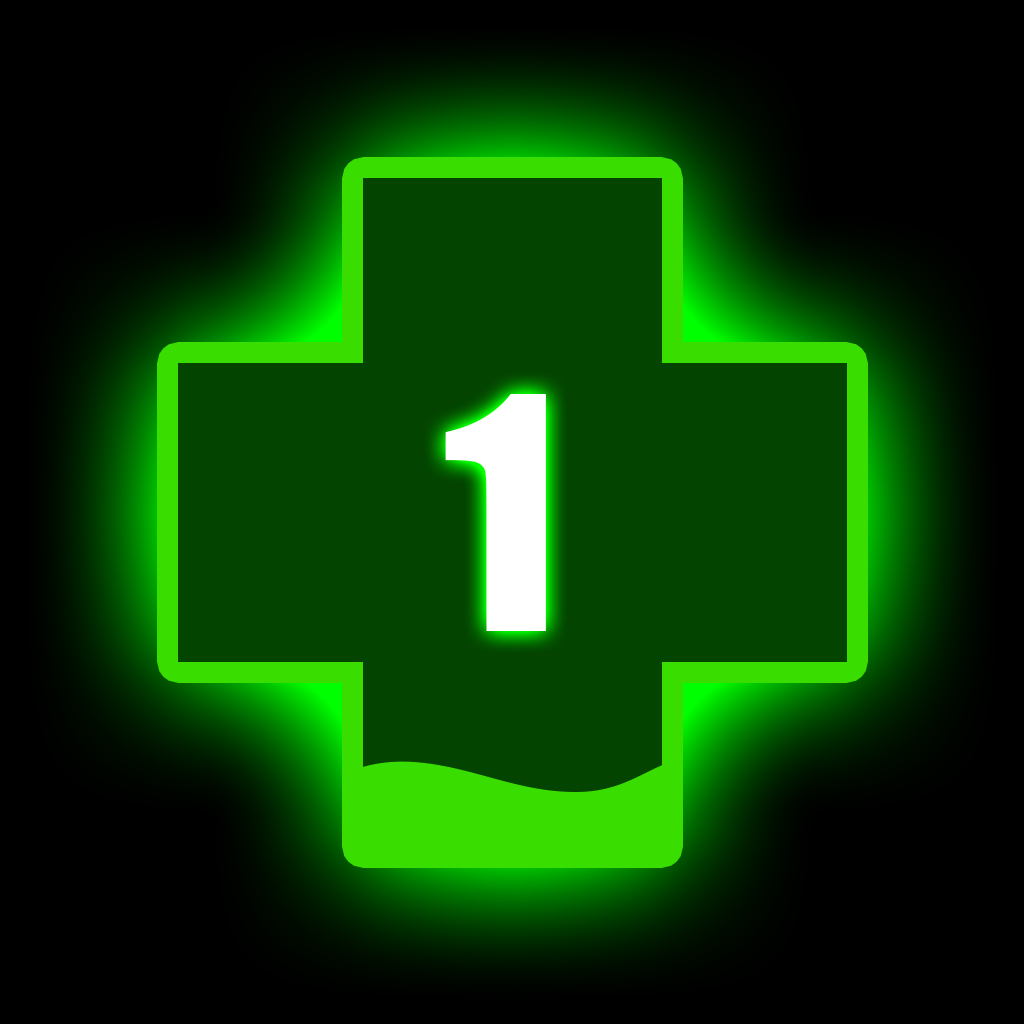
<style>
.page{position:relative;width:1024px;height:1024px;background:#000000}
.page>*{position:absolute;margin:0}
.t1{font:300px "Impact";color:#ffffff}
</style>
<div class="page">
<p class="t1" style="left:445px;top:394px;width:101px;height:237px">1</p>
</div>
